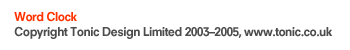
<style>
.page{position:relative;width:350px;height:50px;background:#ffffff}
.page>*{position:absolute;margin:0}
.t1{font:12px/15px "NeuzeitS-BookHeavy";letter-spacing:-0.05em;color:#4c4c4c}
.t2{font:12px/15px "NeuzeitS-BookHeavy";letter-spacing:-0.05em;color:#ff3300}
</style>
<div class="page">
<p class="t1" style="left:14px;top:11px;width:319px;height:28px"><span class="t2">Word Clock<br></span>Copyright Tonic Design Limited 2003–2005, www.tonic.co.uk</p>
</div>
